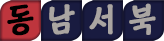
<style>
.page{position:relative;width:164px;height:41px;background:#191b40}
.page>*{position:absolute;margin:0}
.t1{font:32px "KoreanCNM-B";letter-spacing:0.2em;color:#000000;font-weight:bold}
.t2{font:32px "KoreanCNM-B";letter-spacing:0.2em;color:#aaa5a2;font-weight:bold}
</style>
<div class="page">
<p class="t1" style="left:7px;top:4px;width:27px;height:32px">동</p>
<p class="t2" style="left:49px;top:4px;width:26px;height:31px">남</p>
<p class="t2" style="left:89px;top:4px;width:24px;height:31px">서</p>
<p class="t2" style="left:129px;top:3px;width:27px;height:32px">북</p>
</div>
